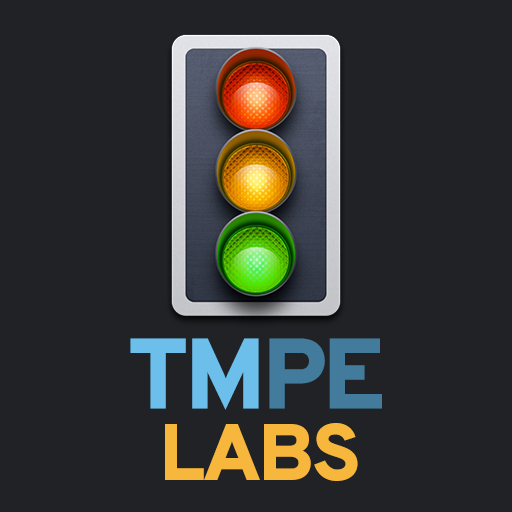
<style>
.page{position:relative;width:512px;height:512px;background:#202225}
.page>*{position:absolute;margin:0}
.t1{font:100px "Overpass-Heavy";letter-spacing:-0.04em;color:#6cbeeb}
.t2{font:100px "Overpass-Heavy";letter-spacing:-0.04em;color:#427b9c}
.t3{font:80px "Overpass-Heavy";letter-spacing:-0.04em;color:#f7b73c}
</style>
<div class="page">
<p class="t1" style="left:130px;top:338px;width:252px;height:72px">TM<span class="t2">PE</span></p>
<p class="t3" style="left:165px;top:423px;width:193px;height:58px">LABS</p>
</div>
